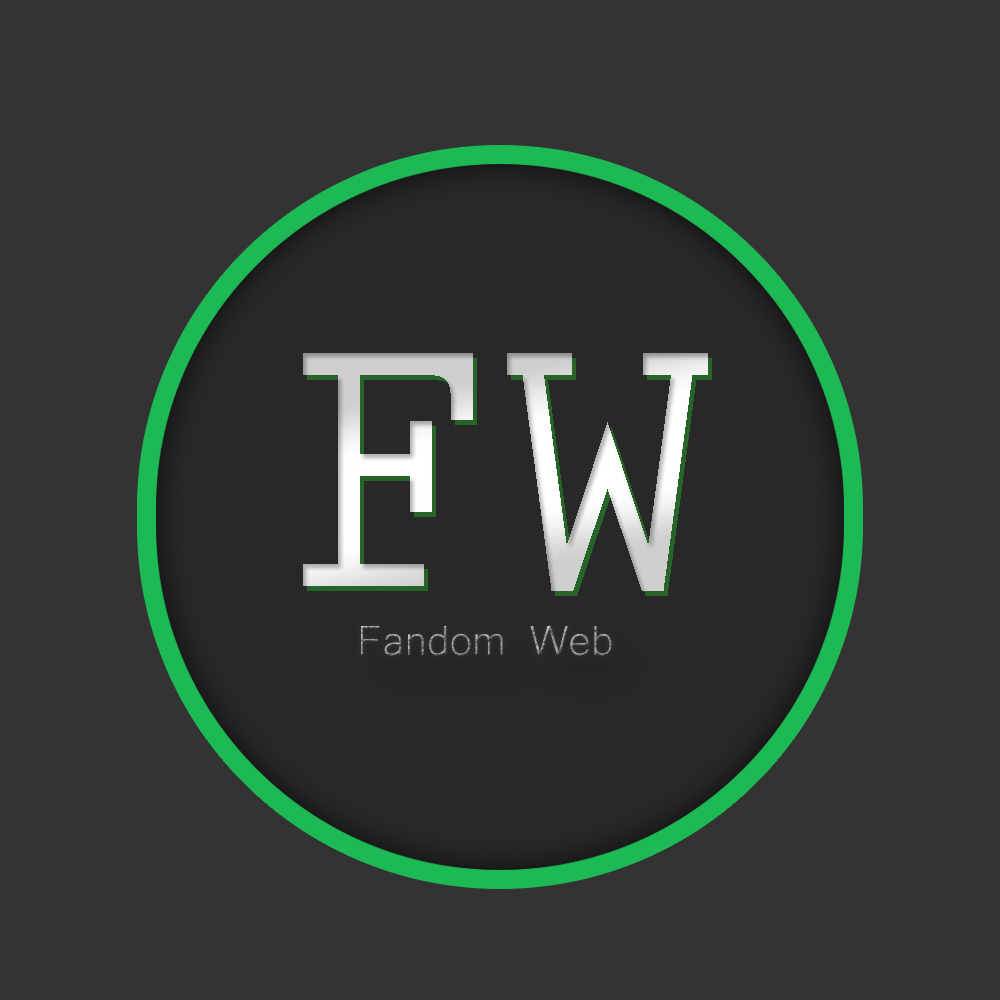
<style>
.page{position:relative;width:1000px;height:1000px;background:#333333}
.page>*{position:absolute;margin:0}
.t1{font:387.7px "PrestigeEliteStd-Bd";scale:0.93 1}
.t2{font:54.2px "Microsoft-Yi-Baiti"}
</style>
<div class="page">
<p class="t1" style="left:303px;top:353px;width:405px;height:238px">FW</p>
<p class="t2" style="left:361px;top:626px;width:251px;height:30px">Fandom Web</p>
</div>
